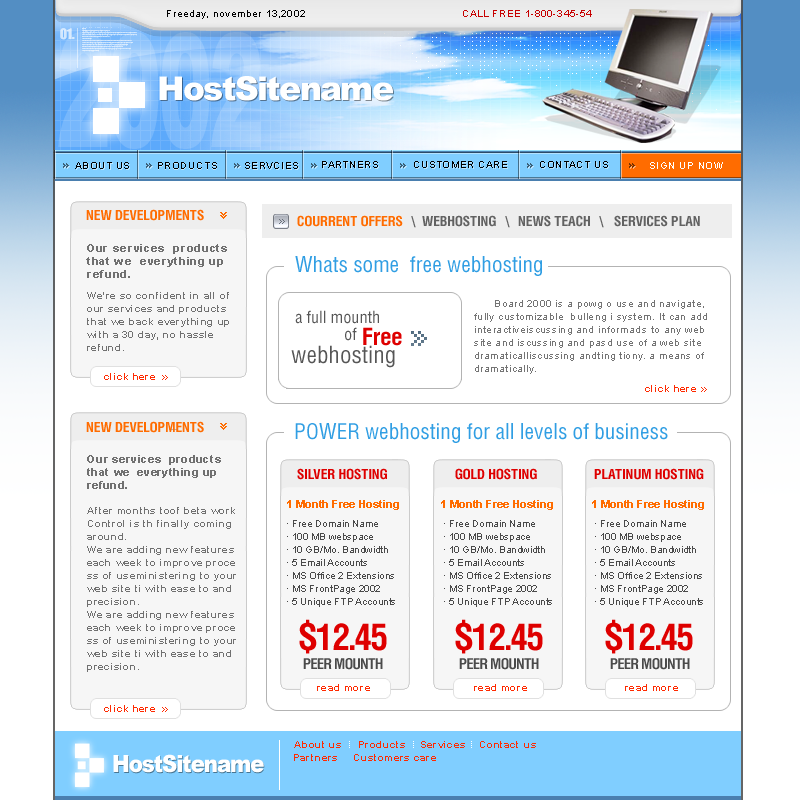
<style>
.page{position:relative;width:800px;height:800px;background:#ffffff}
.page>*{position:absolute;margin:0}
.t1{font:10px "ArialMT";letter-spacing:0.06em;color:#000000}
.t2{font:10px "ArialMT";letter-spacing:0.06em;color:#c70000}
.t3{font:33px "Arial-Black";letter-spacing:-0.05em;color:#ffffff}
.t4{font:10px "ArialMT";letter-spacing:0.06em;color:#c2e8ff}
.t5{font:10px "ArialMT";letter-spacing:0.06em;color:#c1e7ff}
.t6{font:10px "ArialMT";letter-spacing:0.06em;color:#bde5ff}
.t7{font:10px "ArialMT";letter-spacing:0.06em;color:#b9e4ff}
.t8{font:10px "ArialMT";letter-spacing:0.06em;color:#ffffff}
.t9{font:14px "HeliosCond-Bold";color:#ff6c00}
.t10{font:14px "HeliosCond-Bold";color:#626262}
.t11{font:11px/13px "Arial-BoldMT";letter-spacing:0.06em;color:#707070}
.t12{font:22px "HeliosCond";color:#309ee3}
.t13{font:10px/13px "Arial-BoldMT";letter-spacing:0.06em;color:#707070}
.t14{font:10px/13px "ArialMT";letter-spacing:0.06em;color:#747474}
.t15{font:17px "HeliosCond";color:#565656}
.t16{font:24px "HeliosCond-Bold";color:#de0000}
.t17{font:24px "HeliosCond";color:#565656}
.t18{font:10px "Arial-BoldMT";letter-spacing:0.06em;color:#ff2a00}
.t19{font:14px "HeliosCond-Bold";color:#de0000}
.t20{font:11px "Arial-BoldMT";color:#ff6c00}
.t21{font:10px/13px "ArialMT";color:#4a4a4a}
.t22{font:37px "HeliosCond-Bold";letter-spacing:-0.04em;color:#de0000}
.t23{font:15px "HeliosCond-Bold";letter-spacing:-0.04em;color:#4a4a4a}
.t24{font:23.8px "Arial-Black";letter-spacing:-0.05em;color:#ffffff;scale:0.89 1}
</style>
<div class="page">
<p class="t1" style="left:167px;top:10px;width:138px;height:9px">Freeday, november 13,2002</p>
<p class="t2" style="left:463px;top:10px;width:129px;height:7px">CALL FREE 1-800-345-54</p>
<p class="t3" style="left:159px;top:76px;width:234px;height:25px">HostSitename</p>
<p class="t3" style="left:160px;top:77px;width:234px;height:25px">HostSitename</p>
<p class="t1" style="left:322px;top:161px;width:56px;height:7px">PARTNERS</p>
<p class="t1" style="left:414px;top:161px;width:93px;height:7px">CUSTOMER CARE</p>
<p class="t1" style="left:540px;top:161px;width:68px;height:7px">CONTACT US</p>
<p class="t1" style="left:75px;top:162px;width:54px;height:7px">ABOUT US</p>
<p class="t4" style="left:76px;top:163px;width:54px;height:7px">ABOUT US</p>
<p class="t1" style="left:158px;top:162px;width:59px;height:7px">PRODUCTS</p>
<p class="t1" style="left:245px;top:162px;width:53px;height:7px">SERVCIES</p>
<p class="t4" style="left:246px;top:163px;width:53px;height:7px">SERVCIES</p>
<p class="t5" style="left:323px;top:162px;width:56px;height:7px">PARTNERS</p>
<p class="t6" style="left:415px;top:162px;width:93px;height:7px">CUSTOMER CARE</p>
<p class="t7" style="left:541px;top:162px;width:68px;height:7px">CONTACT US</p>
<p class="t8" style="left:650px;top:162px;width:73px;height:7px">SIGN UP NOW</p>
<p class="t9" style="left:86px;top:209px;width:118px;height:12px">NEW DEVELOPMENTS</p>
<p class="t9" style="left:297px;top:215px;width:106px;height:12px">COURRENT OFFERS</p>
<p class="t10" style="left:422px;top:215px;width:74px;height:12px">WEBHOSTING</p>
<p class="t10" style="left:518px;top:215px;width:72px;height:12px">NEWS TEACH</p>
<p class="t10" style="left:614px;top:215px;width:86px;height:12px">SERVICES PLAN</p>
<p class="t11" style="left:86px;top:244px;width:141px;height:34px">Our services  products <br>that we  everything up <br>refund.</p>
<p class="t12" style="left:295px;top:256px;width:247px;height:20px">Whats some  free webhosting</p>
<p class="t13" style="left:87px;top:292px;width:142px;height:59px">We're so confident in all of <br>our services and products <br>that we back everything up <br>with a 30 day, no hassle <br>refund.</p>
<p class="t14" style="left:474px;top:300px;width:233px;height:74px">Board 2000 is a powg o use and navigate, <br>fully customizable  bulleng i system. It can add <br>interactiveiscussing and informads to any web <br>site and iscussing and pasd use of a web site <br>dramaticalliscussing andting tiony. a means of <br>dramatically.</p>
<p class="t15" style="left:295px;top:310px;width:84px;height:14px">a full mounth</p>
<p class="t15" style="left:345px;top:327px;width:12px;height:14px">of</p>
<p class="t16" style="left:363px;top:327px;width:39px;height:19px">Free</p>
<p class="t17" style="left:291px;top:345px;width:104px;height:23px">webhosting</p>
<p class="t18" style="left:104px;top:373px;width:51px;height:7px">click here</p>
<p class="t18" style="left:645px;top:385px;width:51px;height:7px">click here</p>
<p class="t9" style="left:86px;top:421px;width:118px;height:12px">NEW DEVELOPMENTS</p>
<p class="t12" style="left:295px;top:423px;width:373px;height:20px">POWER webhosting for all levels of business</p>
<p class="t11" style="left:87px;top:455px;width:134px;height:34px">Our services  products <br>that we  everything up <br>refund.</p>
<p class="t19" style="left:297px;top:468px;width:90px;height:12px">SILVER HOSTING</p>
<p class="t19" style="left:455px;top:468px;width:82px;height:12px">GOLD HOSTING</p>
<p class="t19" style="left:594px;top:468px;width:110px;height:12px">PLATINUM HOSTING</p>
<p class="t13" style="left:87px;top:507px;width:149px;height:165px">After months toof beta work<br>Control is th finally coming <br>around.  <br>We are adding new features <br>each week to improve proce<br>ss of useministering to your <br>web site ti with ease to and <br>precision. <br>We are adding new features <br>each week to improve proce<br>ss of useministering to your <br>web site ti with ease to and <br>precision.</p>
<p class="t20" style="left:287px;top:500px;width:112px;height:10px">1 Month Free Hosting</p>
<p class="t20" style="left:441px;top:500px;width:112px;height:10px">1 Month Free Hosting</p>
<p class="t20" style="left:592px;top:500px;width:112px;height:10px">1 Month Free Hosting</p>
<p class="t21" style="left:287px;top:520px;width:108px;height:87px">· Free Domain Name <br>· 100 MB webspace <br>· 10 GB/Mo. Bandwidth <br>· 5 Email Accounts <br>· MS Office 2 Extensions <br>· MS FrontPage 2002 <br>· 5 Unique FTP Accounts</p>
<p class="t21" style="left:444px;top:520px;width:108px;height:87px">· Free Domain Name <br>· 100 MB webspace <br>· 10 GB/Mo. Bandwidth <br>· 5 Email Accounts <br>· MS Office 2 Extensions <br>· MS FrontPage 2002 <br>· 5 Unique FTP Accounts</p>
<p class="t21" style="left:595px;top:520px;width:108px;height:87px">· Free Domain Name <br>· 100 MB webspace <br>· 10 GB/Mo. Bandwidth <br>· 5 Email Accounts <br>· MS Office 2 Extensions <br>· MS FrontPage 2002 <br>· 5 Unique FTP Accounts</p>
<p class="t22" style="left:299px;top:619px;width:88px;height:35px">$12.45</p>
<p class="t22" style="left:455px;top:619px;width:88px;height:35px">$12.45</p>
<p class="t22" style="left:605px;top:619px;width:88px;height:35px">$12.45</p>
<p class="t23" style="left:303px;top:658px;width:80px;height:12px">PEER MOUNTH</p>
<p class="t23" style="left:459px;top:658px;width:80px;height:12px">PEER MOUNTH</p>
<p class="t23" style="left:610px;top:658px;width:80px;height:12px">PEER MOUNTH</p>
<p class="t18" style="left:317px;top:684px;width:53px;height:7px">read more</p>
<p class="t18" style="left:474px;top:684px;width:53px;height:7px">read more</p>
<p class="t18" style="left:625px;top:684px;width:53px;height:7px">read more</p>
<p class="t18" style="left:104px;top:705px;width:51px;height:7px">click here</p>
<p class="t18" style="left:294px;top:741px;width:47px;height:7px">About us</p>
<p class="t18" style="left:359px;top:741px;width:46px;height:7px">Products</p>
<p class="t18" style="left:421px;top:741px;width:44px;height:7px">Services</p>
<p class="t18" style="left:480px;top:741px;width:56px;height:7px">Contact us</p>
<p class="t24" style="left:113px;top:754px;width:151px;height:19px">HostSitename</p>
<p class="t24" style="left:114px;top:755px;width:151px;height:19px">HostSitename</p>
<p class="t18" style="left:294px;top:754px;width:43px;height:7px">Partners</p>
<p class="t18" style="left:354px;top:754px;width:82px;height:7px">Customers care</p>
</div>
